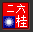
<style>
.page{position:relative;width:33px;height:32px;background:#f20000}
.page>*{position:absolute;margin:0}
.t1{font:10.4px "SimSun";color:#ffffff}
.t2{font:11.7px "SimSun";color:#ffffff}
</style>
<div class="page">
<p class="t1" style="left:7px;top:4px;width:18px;height:9px">二六</p>
<p class="t2" style="left:16px;top:15px;width:11px;height:12px">桂</p>
</div>
